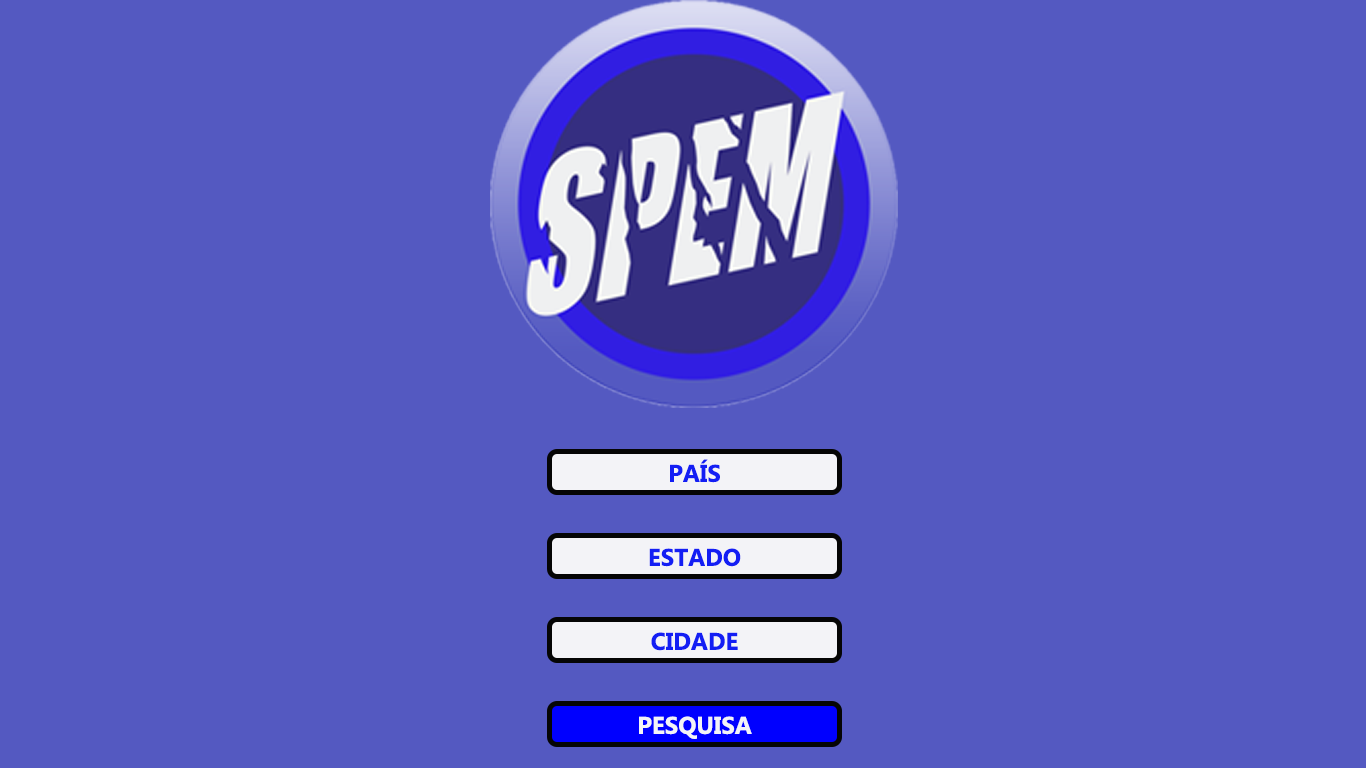
<style>
.page{position:relative;width:1366px;height:768px;background:#5459c1}
.page>*{position:absolute;margin:0}
.t1{font:24px "Gadugi-Bold";color:#131ef4}
.t2{font:24px "Gadugi-Bold";color:#f3f3f7}
</style>
<div class="page">
<p class="t1" style="left:670px;top:459px;width:50px;height:24px">PAÍS</p>
<p class="t1" style="left:649px;top:548px;width:92px;height:19px">ESTADO</p>
<p class="t1" style="left:651px;top:632px;width:87px;height:19px">CIDADE</p>
<p class="t2" style="left:639px;top:716px;width:113px;height:23px">PESQUISA</p>
</div>
